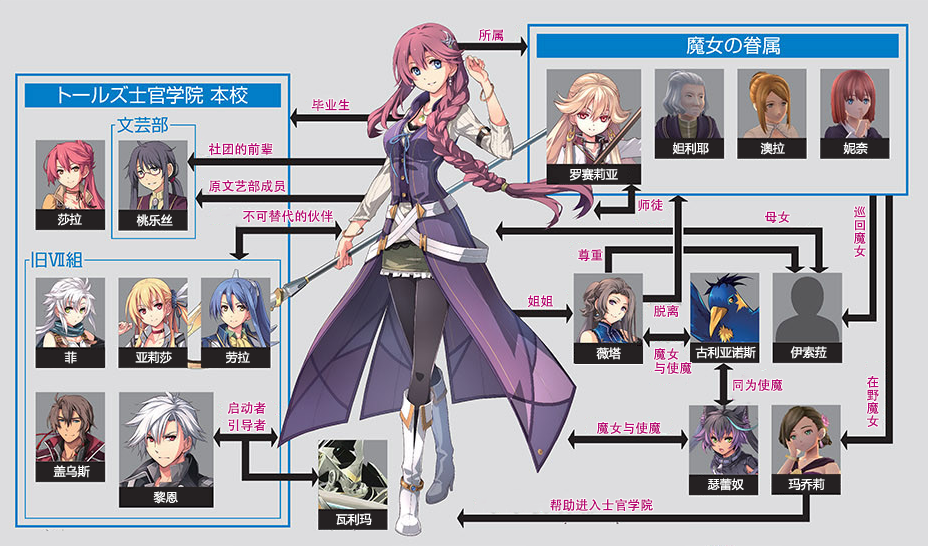
<style>
.page{position:relative;width:928px;height:546px;background:#dddddf}
.page>*{position:absolute;margin:0}
.t1{font:13px "AdobeHeitiStd-Regular";color:#b70773}
.t2{font:12px "MicrosoftYaHei";color:#ffffff}
.t3{font:13px/13px "AdobeHeitiStd-Regular";color:#b70773}
.t4{font:13px/14px "AdobeHeitiStd-Regular";color:#b70773}
.t5{font:13px/17px "AdobeHeitiStd-Regular";color:#b70773}
</style>
<div class="page">
<p class="t1" style="left:478px;top:29px;width:26px;height:13px">所属</p>
<p class="t1" style="left:311px;top:99px;width:39px;height:13px">毕业生</p>
<p class="t1" style="left:208px;top:143px;width:65px;height:13px">社团的前辈</p>
<p class="t2" style="left:672px;top:142px;width:37px;height:13px">妲利耶</p>
<p class="t2" style="left:760px;top:142px;width:25px;height:13px">澳拉</p>
<p class="t2" style="left:843px;top:142px;width:25px;height:13px">妮奈</p>
<p class="t2" style="left:569px;top:168px;width:49px;height:13px">罗赛莉亚</p>
<p class="t1" style="left:209px;top:180px;width:77px;height:13px">原文艺部成员</p>
<p class="t1" style="left:638px;top:199px;width:25px;height:13px">师徒</p>
<p class="t3" style="left:853px;top:206px;width:13px;height:51px">巡<br>回<br>魔<br>女</p>
<p class="t2" style="left:57px;top:213px;width:25px;height:13px">莎拉</p>
<p class="t2" style="left:136px;top:214px;width:37px;height:13px">桃乐丝</p>
<p class="t1" style="left:243px;top:210px;width:90px;height:13px">不可替代的伙伴</p>
<p class="t1" style="left:765px;top:211px;width:25px;height:13px">母女</p>
<p class="t1" style="left:578px;top:249px;width:25px;height:13px">尊重</p>
<p class="t1" style="left:527px;top:295px;width:26px;height:13px">姐姐</p>
<p class="t1" style="left:653px;top:305px;width:26px;height:13px">脱离</p>
<p class="t2" style="left:64px;top:351px;width:13px;height:13px">菲</p>
<p class="t2" style="left:135px;top:351px;width:37px;height:13px">亚莉莎</p>
<p class="t2" style="left:226px;top:351px;width:24px;height:13px">劳拉</p>
<p class="t2" style="left:596px;top:347px;width:25px;height:13px">薇塔</p>
<p class="t4" style="left:653px;top:348px;width:39px;height:27px">魔女<br>与使魔</p>
<p class="t2" style="left:695px;top:346px;width:61px;height:13px">古利亚诺斯</p>
<p class="t2" style="left:790px;top:346px;width:37px;height:13px">伊索菈</p>
<p class="t3" style="left:866px;top:375px;width:13px;height:52px">在<br>野<br>魔<br>女</p>
<p class="t1" style="left:733px;top:379px;width:50px;height:13px">同为使魔</p>
<p class="t5" style="left:227px;top:401px;width:39px;height:31px">启动者<br>引导者</p>
<p class="t1" style="left:596px;top:422px;width:65px;height:13px">魔女与使魔</p>
<p class="t2" style="left:53px;top:465px;width:37px;height:13px">盖乌斯</p>
<p class="t2" style="left:707px;top:478px;width:37px;height:13px">瑟蕾奴</p>
<p class="t2" style="left:788px;top:478px;width:37px;height:13px">玛乔莉</p>
<p class="t2" style="left:153px;top:491px;width:25px;height:13px">黎恩</p>
<p class="t1" style="left:550px;top:498px;width:103px;height:14px">帮助进入士官学院</p>
<p class="t2" style="left:336px;top:513px;width:36px;height:13px">瓦利玛</p>
</div>
